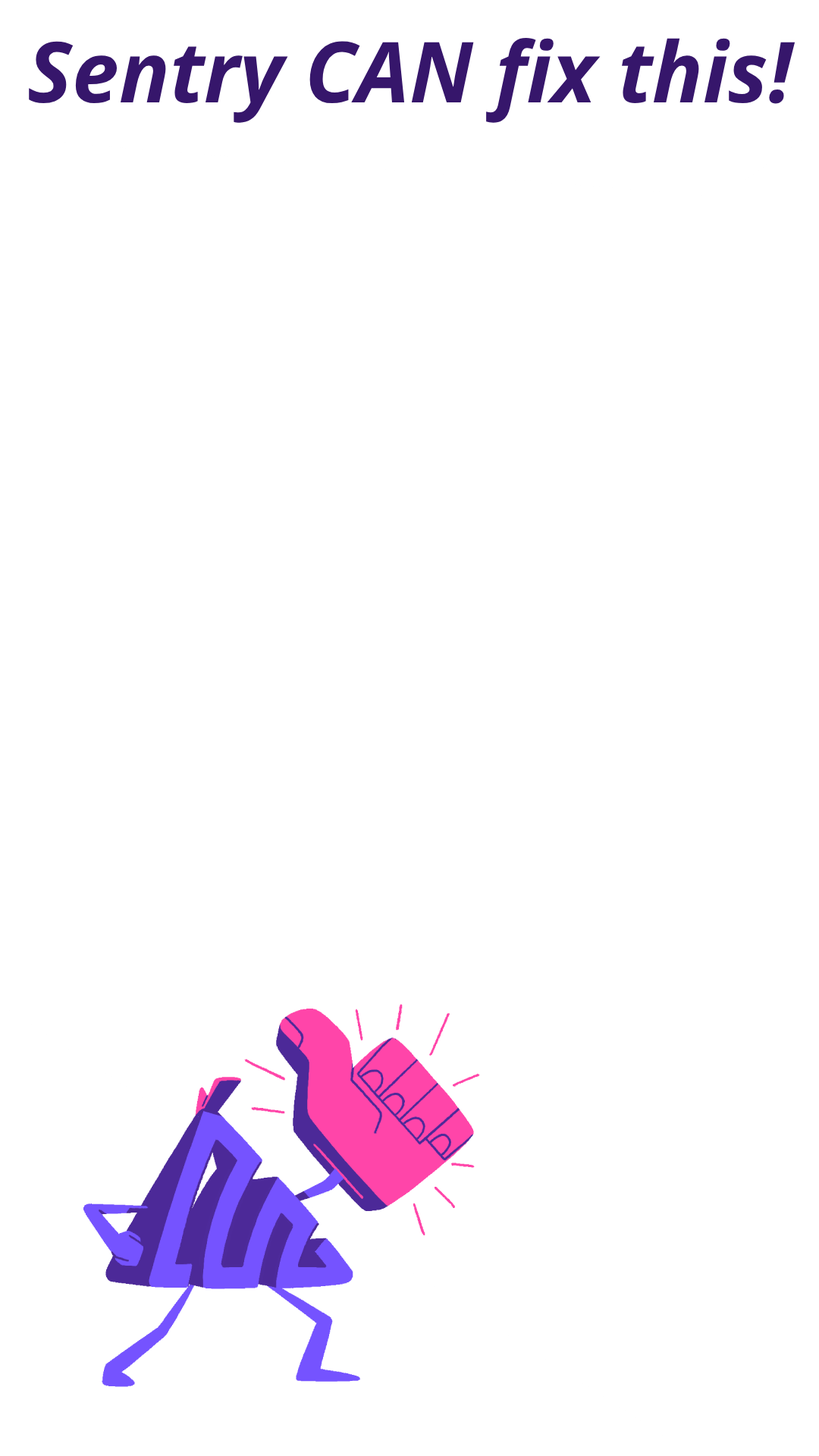
<style>
.page{position:relative;width:819px;height:1456px;background:#ffffff}
.page>*{position:absolute;margin:0}
.t1{font:84.2px "NotoSans-BoldItalic";color:#36166b}
</style>
<div class="page">
<p class="t1" style="left:29px;top:38px;width:766px;height:85px">Sentry CAN fix this!</p>
</div>
